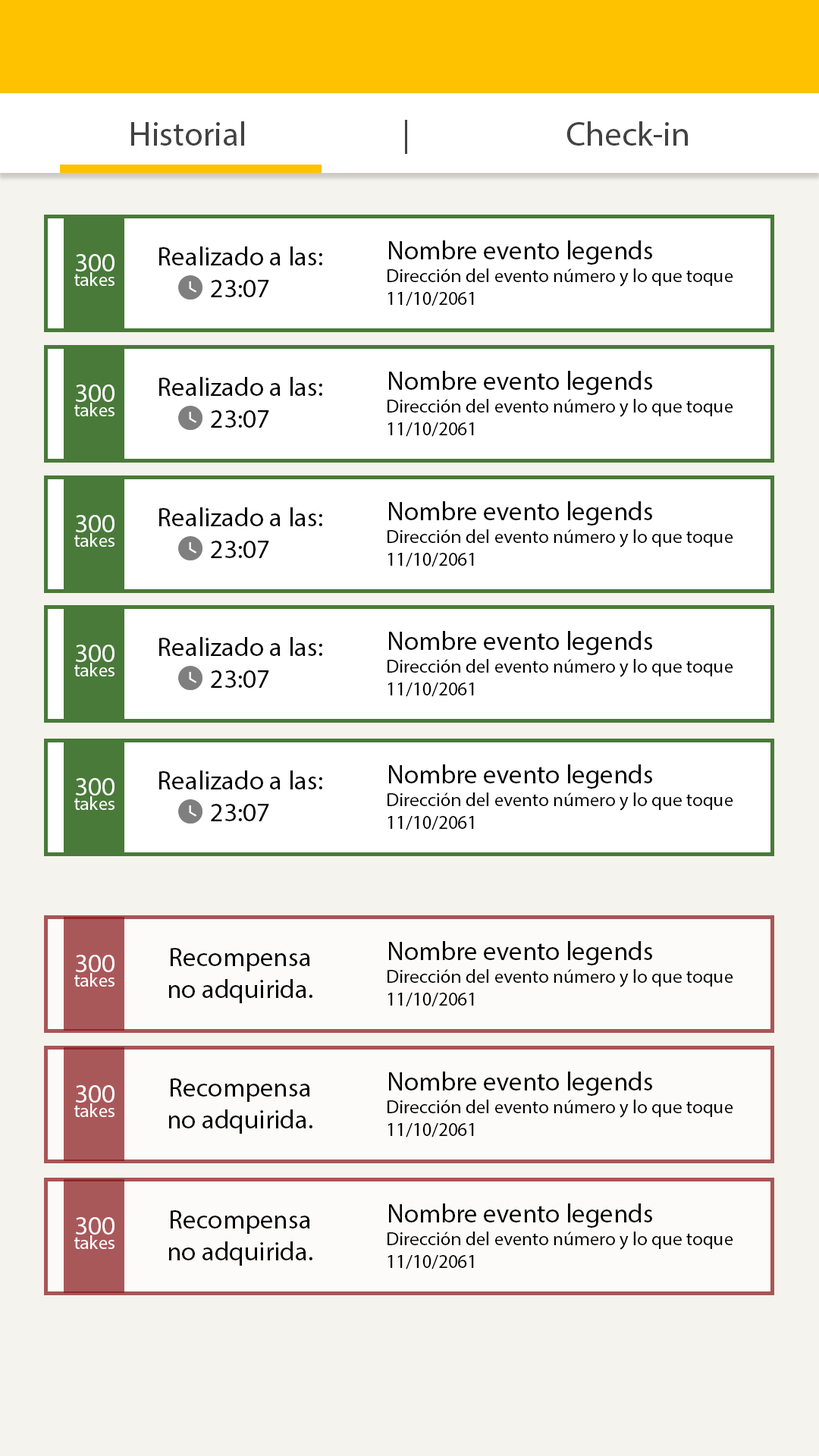
<style>
.page{position:relative;width:819px;height:1456px;background:#ffffff}
.page>*{position:absolute;margin:0}
.t1{font:34.1px "MyriadPro-Regular";color:#424242}
.t2{font:19px "MyriadPro-Regular";color:#000000}
.t3{font:26.5px "MyriadPro-Regular";color:#000000}
.t4{font:19px/14.4px "MyriadPro-Regular";color:#ffffff}
.t5{font:26.5px "MyriadPro-Regular";color:#ffffff}
</style>
<div class="page">
<p class="t1" style="left:131px;top:120px;width:557px;height:34px">Historial      |      Check-in</p>
<p class="t2" style="left:388px;top:240px;width:345px;height:66px"><span class="t3">Nombre evento legends<br></span>Dirección del evento número y lo que toque<br>11/10/2061</p>
<p class="t2" style="left:388px;top:240px;width:345px;height:66px"><span class="t3">Nombre evento legends<br></span>Dirección del evento número y lo que toque<br>11/10/2061</p>
<p class="t4" style="left:74px;top:254px;width:41px;height:32px;text-align:center"><span class="t5">300<br></span>takes</p>
<p class="t4" style="left:74px;top:254px;width:41px;height:32px;text-align:center"><span class="t5">300<br></span>takes</p>
<p class="t3" style="left:159px;top:246px;width:163px;height:51px;text-align:center">Realizado a las:<br>23:07</p>
<p class="t3" style="left:159px;top:246px;width:163px;height:51px;text-align:center">Realizado a las:<br>23:07</p>
<p class="t3" style="left:159px;top:377px;width:163px;height:51px;text-align:center">Realizado a las:<br>23:07</p>
<p class="t2" style="left:388px;top:371px;width:345px;height:66px"><span class="t3">Nombre evento legends<br></span>Dirección del evento número y lo que toque<br>11/10/2061</p>
<p class="t4" style="left:74px;top:384px;width:41px;height:32px;text-align:center"><span class="t5">300<br></span>takes</p>
<p class="t3" style="left:159px;top:507px;width:163px;height:51px;text-align:center">Realizado a las:<br>23:07</p>
<p class="t2" style="left:388px;top:501px;width:345px;height:66px"><span class="t3">Nombre evento legends<br></span>Dirección del evento número y lo que toque<br>11/10/2061</p>
<p class="t4" style="left:74px;top:515px;width:41px;height:32px;text-align:center"><span class="t5">300<br></span>takes</p>
<p class="t3" style="left:159px;top:637px;width:163px;height:51px;text-align:center">Realizado a las:<br>23:07</p>
<p class="t2" style="left:388px;top:631px;width:345px;height:66px"><span class="t3">Nombre evento legends<br></span>Dirección del evento número y lo que toque<br>11/10/2061</p>
<p class="t4" style="left:74px;top:645px;width:41px;height:31px;text-align:center"><span class="t5">300<br></span>takes</p>
<p class="t3" style="left:159px;top:770px;width:163px;height:51px;text-align:center">Realizado a las:<br>23:07</p>
<p class="t2" style="left:388px;top:764px;width:345px;height:66px"><span class="t3">Nombre evento legends<br></span>Dirección del evento número y lo que toque<br>11/10/2061</p>
<p class="t4" style="left:74px;top:778px;width:41px;height:32px;text-align:center"><span class="t5">300<br></span>takes</p>
<p class="t2" style="left:388px;top:941px;width:345px;height:66px"><span class="t3">Nombre evento legends<br></span>Dirección del evento número y lo que toque<br>11/10/2061</p>
<p class="t3" style="left:169px;top:948px;width:143px;height:55px;text-align:center">Recompensa<br>no adquirida.</p>
<p class="t4" style="left:74px;top:955px;width:41px;height:32px;text-align:center"><span class="t5">300<br></span>takes</p>
<p class="t2" style="left:388px;top:1072px;width:345px;height:65px"><span class="t3">Nombre evento legends<br></span>Dirección del evento número y lo que toque<br>11/10/2061</p>
<p class="t4" style="left:74px;top:1085px;width:41px;height:32px;text-align:center"><span class="t5">300<br></span>takes</p>
<p class="t3" style="left:169px;top:1078px;width:143px;height:56px;text-align:center">Recompensa<br>no adquirida.</p>
<p class="t2" style="left:388px;top:1203px;width:345px;height:66px"><span class="t3">Nombre evento legends<br></span>Dirección del evento número y lo que toque<br>11/10/2061</p>
<p class="t4" style="left:74px;top:1217px;width:41px;height:32px;text-align:center"><span class="t5">300<br></span>takes</p>
<p class="t3" style="left:169px;top:1210px;width:143px;height:56px;text-align:center">Recompensa<br>no adquirida.</p>
</div>
